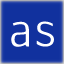
<style>
.page{position:relative;width:64px;height:64px;background:#11319e}
.page>*{position:absolute;margin:0}
.t1{font:45.6px "Aftasans";color:#ffffff}
.t2{font:45.6px "Aftasans";color:#ffffff;scale:0.91 1}
</style>
<div class="page">
<p class="t1" style="left:11px;top:21px;width:18px;height:26px">a</p>
<p class="t2" style="left:36px;top:21px;width:18px;height:26px">s</p>
</div>
